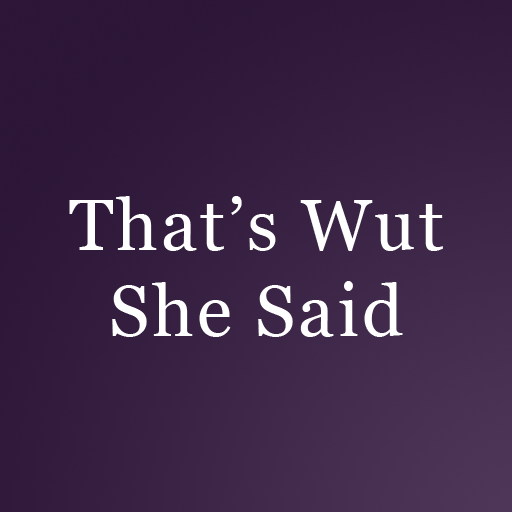
<style>
.page{position:relative;width:512px;height:512px}
.page>*{position:absolute;margin:0}
.t1{font:72px "Georgia";letter-spacing:0.04em;color:#ffffff}
</style>
<div class="page">
<p class="t1" style="left:69px;top:196px;width:374px;height:141px;text-align:center">That’s Wut<br>She Said</p>
</div>
